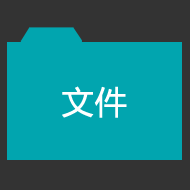
<style>
.page{position:relative;width:190px;height:190px;background:#01a5af}
.page>*{position:absolute;margin:0}
.t1{font:32px "MicrosoftYaHei";color:#ffffff;font-weight:bold}
</style>
<div class="page">
<p class="t1" style="left:62px;top:86px;width:65px;height:32px">文件</p>
</div>
